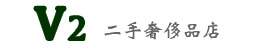
<style>
.page{position:relative;width:260px;height:50px;background:#ffffff}
.page>*{position:absolute;margin:0}
.t1{font:19.8px "Weibei-SC-Bold";color:#666666}
</style>
<div class="page">
<p class="t1" style="left:104px;top:21px;width:115px;height:19px">二手奢侈品店</p>
</div>
